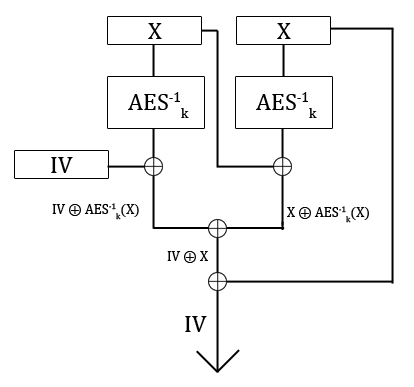
<style>
.page{position:relative;width:414px;height:387px;background:#ffffff}
.page>*{position:absolute;margin:0}
.t1{font:24px "CambriaMath";color:#000000}
.t2{font:14px "CambriaMath";color:#000000}
</style>
<div class="page">
<p class="t1" style="left:148px;top:23px;width:14px;height:16px">X</p>
<p class="t1" style="left:277px;top:23px;width:14px;height:16px">X</p>
<p class="t1" style="left:128px;top:92px;width:61px;height:26px">AES-1k</p>
<p class="t1" style="left:256px;top:92px;width:61px;height:26px">AES-1k</p>
<p class="t1" style="left:51px;top:157px;width:22px;height:16px">IV</p>
<p class="t2" style="left:52px;top:203px;width:87px;height:17px">IV ⊕ AES-1k(X)</p>
<p class="t2" style="left:287px;top:206px;width:82px;height:17px">X ⊕ AES-1k(X)</p>
<p class="t2" style="left:167px;top:251px;width:41px;height:12px">IV ⊕ X</p>
<p class="t1" style="left:185px;top:316px;width:22px;height:16px">IV</p>
</div>
